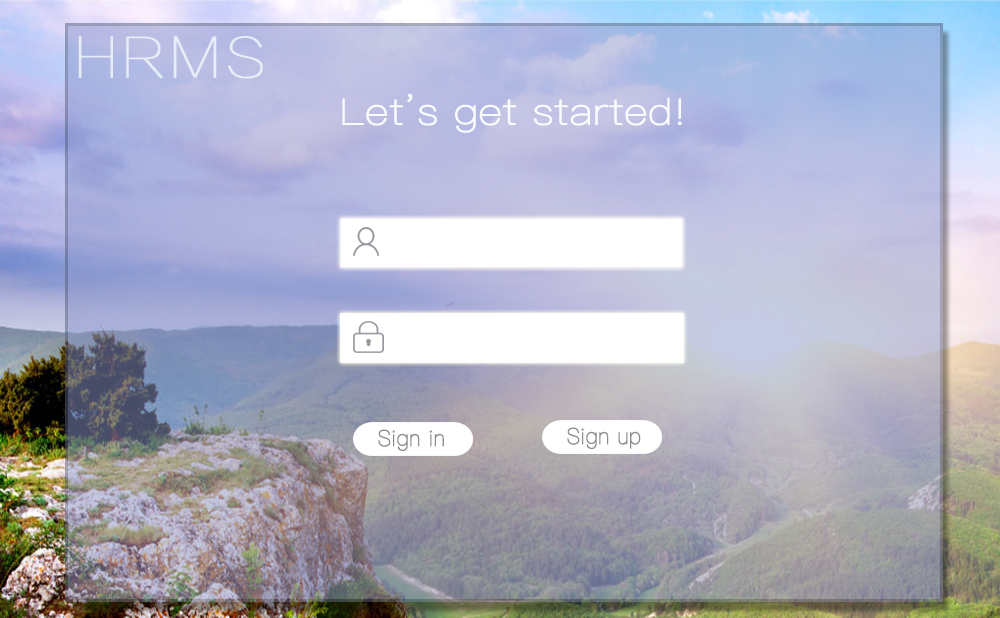
<style>
.page{position:relative;width:1000px;height:618px}
.page>*{position:absolute;margin:0}
.t1{font:36px "PingFangSC-Ultralight";color:#fafbfd;font-weight:bold;scale:1.16 1}
.t2{font:22px "PingFangSC-Ultralight";color:#8d8e8e;font-weight:bold;scale:0.96 1}
</style>
<div class="page">
<p class="t1" style="left:342px;top:93px;width:340px;height:40px">Let’s get started!</p>
<p class="t2" style="left:378px;top:429px;width:66px;height:22px">Sign in</p>
<p class="t2" style="left:567px;top:427px;width:74px;height:22px">Sign up</p>
</div>
